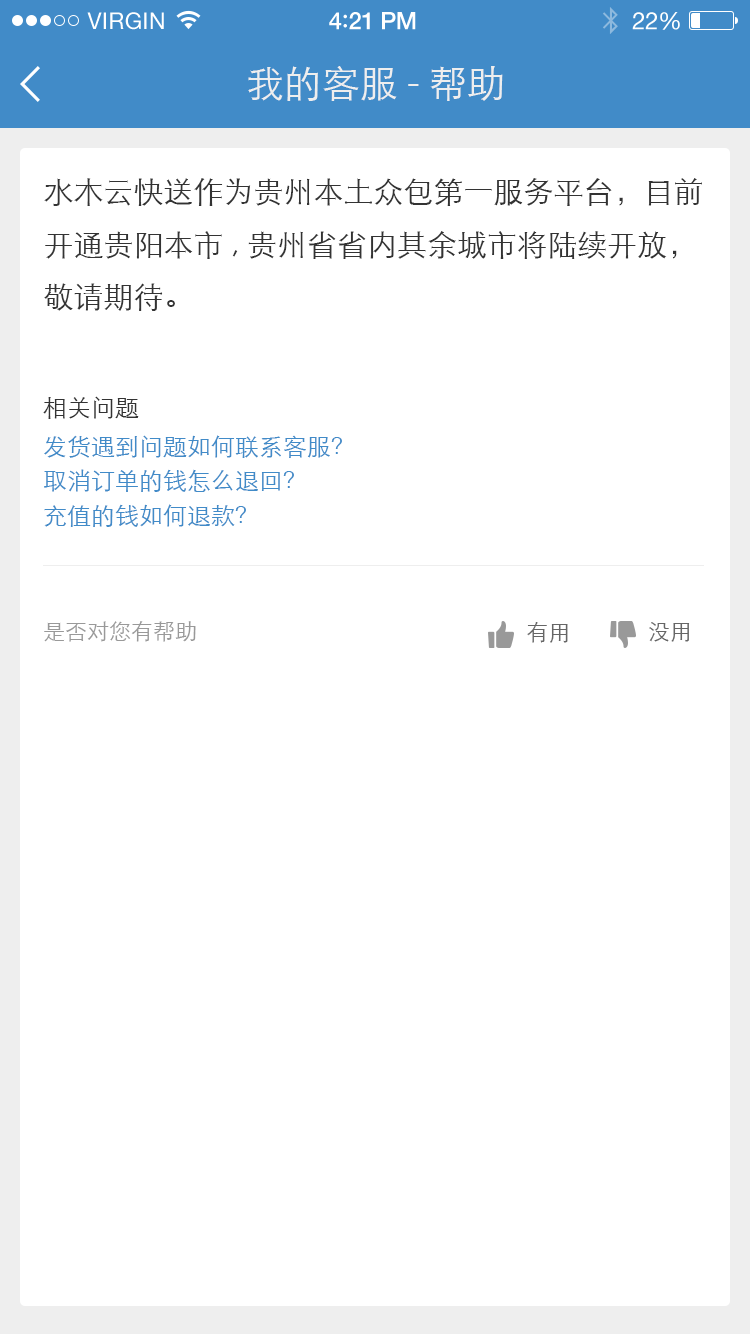
<style>
.page{position:relative;width:750px;height:1334px;background:#ffffff}
.page>*{position:absolute;margin:0}
.t1{font:23px "HelveticaNeue";letter-spacing:0.02em;color:#ffffff}
.t2{font:24px "HelveticaNeue-Medium";letter-spacing:-0.02em;color:#ffffff}
.t3{font:26px "Avenir-Medium";letter-spacing:-0.02em;color:#ffffff}
.t4{font:24px "HelveticaNeue";letter-spacing:-0.02em;color:#ffffff}
.t5{font:38px "STXihei";color:#eeeeee}
.t6{font:30px "STXihei";color:#333333}
.t7{font:24px "STXihei";color:#333333}
.t8{font:24px "STXihei";color:#418bc8}
.t9{font:22px "STXihei";color:#999999}
.t10{font:22px "STXihei";color:#666666}
</style>
<div class="page">
<p class="t1" style="left:87px;top:12px;width:77px;height:18px">VIRGIN</p>
<p class="t2" style="left:329px;top:12px;width:87px;height:18px">4<span class="t3">:</span>21 PM</p>
<p class="t4" style="left:632px;top:12px;width:48px;height:18px">22%</p>
<p class="t5" style="left:248px;top:66px;width:255px;height:35px">我的客服-帮助</p>
<p class="t6" style="left:44px;top:178px;width:658px;height:133px">水木云快送作为贵州本土众包第一服务平台，目前开通贵阳本市,贵州省省内其余城市将陆续开放，敬请期待。</p>
<p class="t7" style="left:43px;top:396px;width:96px;height:23px">相关问题</p>
<p class="t8" style="left:44px;top:435px;width:298px;height:23px">发货遇到问题如何联系客服？</p>
<p class="t8" style="left:44px;top:469px;width:250px;height:23px">取消订单的钱怎么退回？</p>
<p class="t8" style="left:44px;top:504px;width:202px;height:23px">充值的钱如何退款？</p>
<p class="t9" style="left:44px;top:621px;width:152px;height:21px">是否对您有帮助</p>
<p class="t10" style="left:527px;top:622px;width:41px;height:21px">有用</p>
<p class="t10" style="left:649px;top:622px;width:41px;height:20px">没用</p>
</div>
